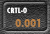
<style>
.page{position:relative;width:50px;height:34px}
.page>*{position:absolute;margin:0}
.t1{font:8px "TwCenMT-CondensedExtraBold";color:#ffffff}
.t2{font:12px "TwCenMT-CondensedExtraBold";color:#b47f4a}
</style>
<div class="page">
<p class="t1" style="left:7px;top:7px;width:20px;height:7px">CRTL-0</p>
<p class="t2" style="left:15px;top:19px;width:26px;height:8px">0.001</p>
</div>
